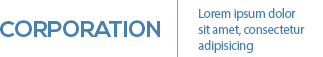
<style>
.page{position:relative;width:323px;height:57px;background:#ffffff}
.page>*{position:absolute;margin:0}
.t1{font:13px "MyriadPro-Regular";letter-spacing:-0.025em;color:#4480b2}
.t2{font:23px "NexaBold";letter-spacing:-0.025em;color:#4480b2}
</style>
<div class="page">
<p class="t1" style="left:198px;top:8px;width:107px;height:45px">Lorem ipsum dolor<br>sit amet, consectetur <br>adipisicing</p>
<p class="t2" style="left:0px;top:20px;width:160px;height:17px">CORPORATION</p>
</div>
